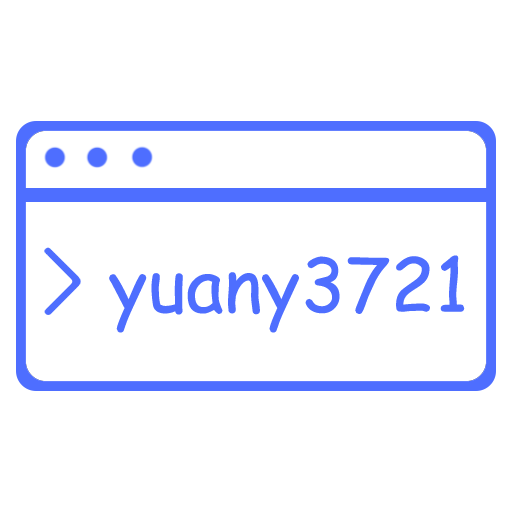
<style>
.page{position:relative;width:512px;height:512px;background:#ffffff}
.page>*{position:absolute;margin:0}
.t1{font:73.6px "ComicSansMS";color:#4e6eff}
</style>
<div class="page">
<p class="t1" style="left:109px;top:255px;width:356px;height:78px">yuany3721</p>
</div>
